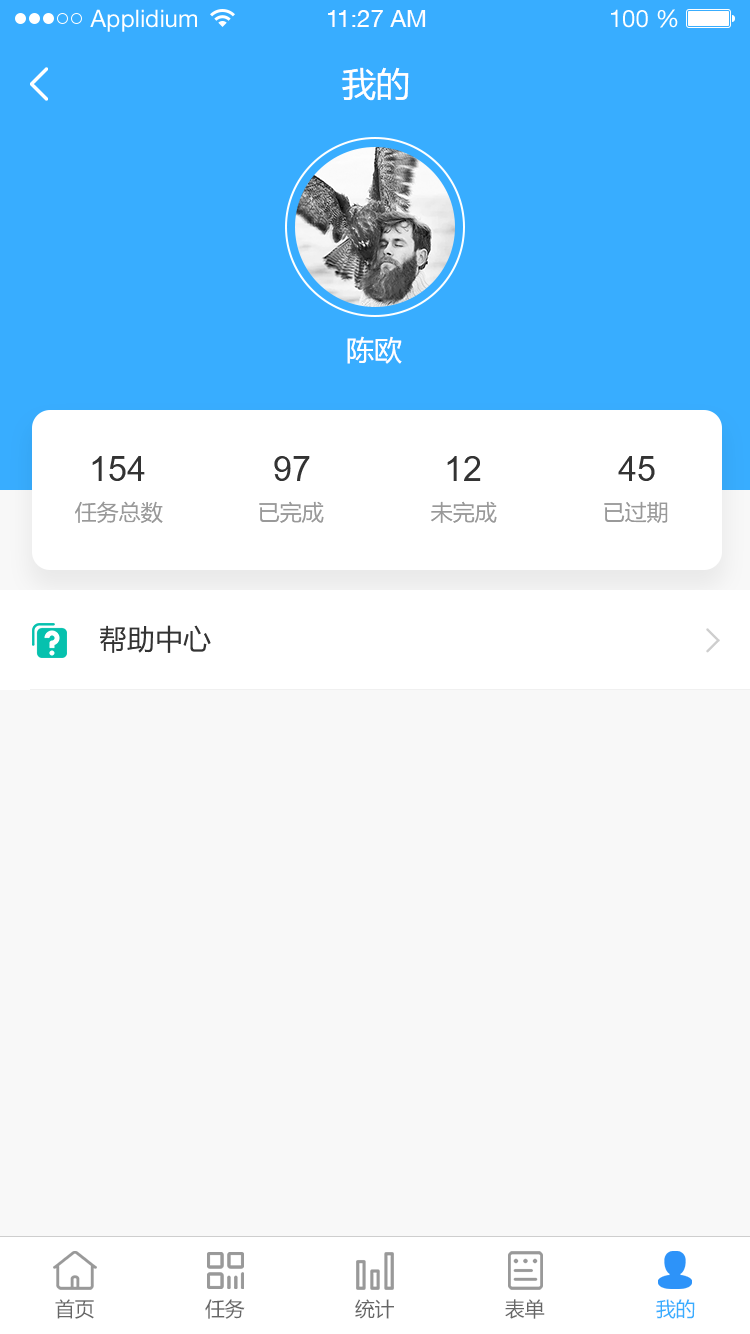
<style>
.page{position:relative;width:750px;height:1334px;background:#f8f8f8}
.page>*{position:absolute;margin:0}
.t1{font:24px "HelveticaNeueLTStd-Roman";color:#ffffff}
.t2{font:24px "HelveticaNeueCE-Roman";color:#ffffff}
.t3{font:34px "MicrosoftYaHei";color:#ffffff}
.t4{font:28px "MicrosoftYaHei";color:#ffffff}
.t5{font:34px "ArialMT";color:#333333}
.t6{font:22px "MicrosoftYaHei";color:#999999}
.t7{font:28px "MicrosoftYaHei";color:#333333}
.t8{font:20px "MicrosoftYaHei";color:#666666;text-transform:uppercase}
.t9{font:20px "MicrosoftYaHei";color:#38adff;text-transform:uppercase}
</style>
<div class="page">
<p class="t1" style="left:90px;top:9px;width:107px;height:23px">Applidium</p>
<p class="t2" style="left:328px;top:10px;width:98px;height:17px">11:27 AM</p>
<p class="t1" style="left:611px;top:9px;width:67px;height:19px">100 %</p>
<p class="t3" style="left:342px;top:67px;width:67px;height:34px">我的</p>
<p class="t4" style="left:347px;top:336px;width:55px;height:28px">陈欧</p>
<p class="t5" style="left:92px;top:456px;width:53px;height:25px">154</p>
<p class="t5" style="left:274px;top:456px;width:36px;height:25px">97</p>
<p class="t5" style="left:447px;top:456px;width:34px;height:25px">12</p>
<p class="t5" style="left:618px;top:456px;width:37px;height:25px">45</p>
<p class="t6" style="left:75px;top:501px;width:88px;height:22px">任务总数</p>
<p class="t6" style="left:259px;top:501px;width:65px;height:22px">已完成</p>
<p class="t6" style="left:431px;top:501px;width:66px;height:22px">未完成</p>
<p class="t6" style="left:604px;top:501px;width:64px;height:22px">已过期</p>
<p class="t7" style="left:100px;top:625px;width:111px;height:28px">帮助中心</p>
<p class="t8" style="left:55px;top:1299px;width:39px;height:20px">首页</p>
<p class="t8" style="left:205px;top:1299px;width:40px;height:20px">任务</p>
<p class="t8" style="left:355px;top:1299px;width:39px;height:20px">统计</p>
<p class="t8" style="left:505px;top:1299px;width:40px;height:20px">表单</p>
<p class="t9" style="left:656px;top:1299px;width:39px;height:20px">我的</p>
</div>
